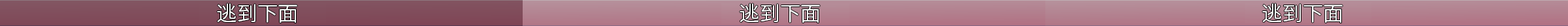
<style>
.page{position:relative;width:1568px;height:26px}
.page>*{position:absolute;margin:0}
.t1{font:20.6px "SourceHanSansSC-Normal";color:#ffffff}
</style>
<div class="page">
<p class="t1" style="left:217px;top:3px;width:80px;height:20px">逃到下面</p>
<p class="t1" style="left:740px;top:3px;width:80px;height:20px">逃到下面</p>
<p class="t1" style="left:1262px;top:3px;width:81px;height:20px">逃到下面</p>
</div>
